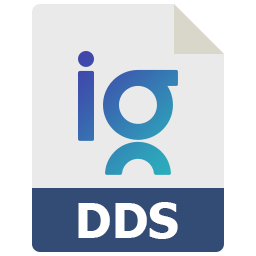
<style>
.page{position:relative;width:256px;height:256px;background:#eaeaea}
.page>*{position:absolute;margin:0}
.t1{font:48px "Tahoma-Bold";color:#ffffff}
</style>
<div class="page">
<p class="t1" style="left:78px;top:202px;width:100px;height:37px">DDS</p>
</div>
